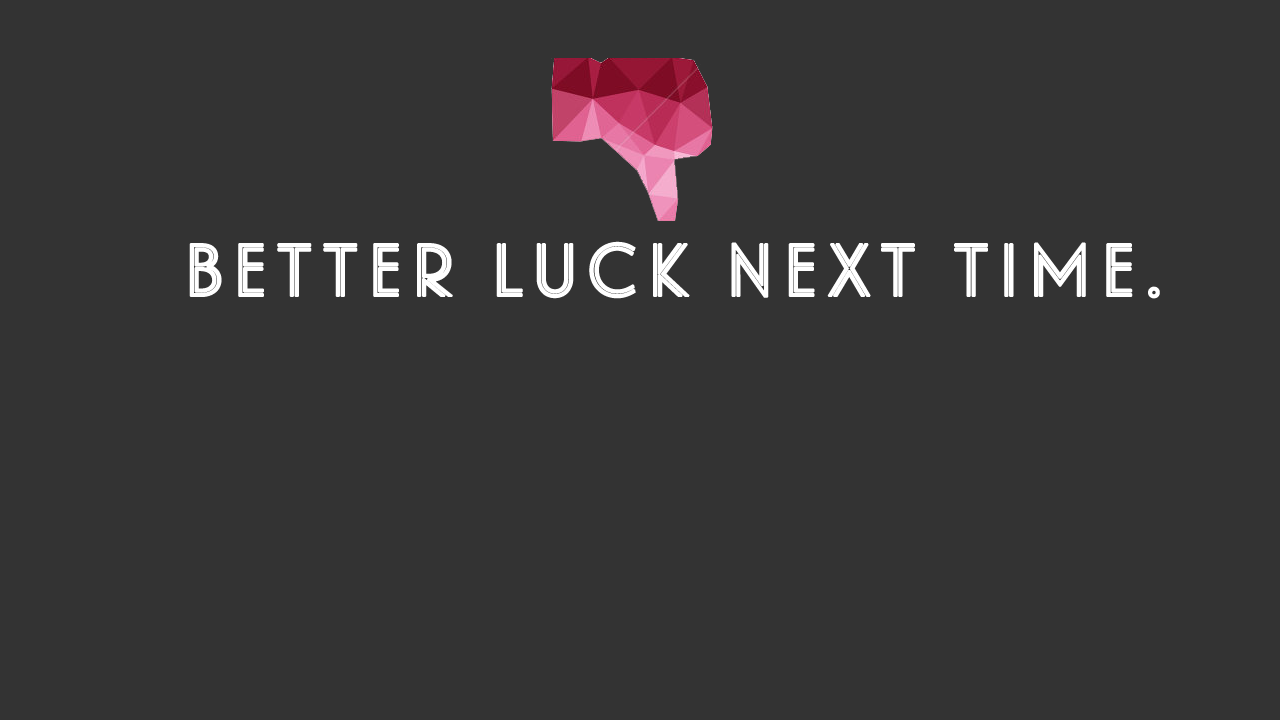
<style>
.page{position:relative;width:1280px;height:720px;background:#333333}
.page>*{position:absolute;margin:0}
.t1{font:72px "Landmark-Inline";letter-spacing:0.1em;color:#ffffff;font-weight:bold}
</style>
<div class="page">
<p class="t1" style="left:189px;top:241px;width:971px;height:58px">better luck next time.</p>
</div>
